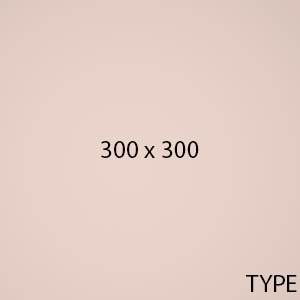
<style>
.page{position:relative;width:300px;height:300px}
.page>*{position:absolute;margin:0}
.t1{font:25px "MyriadPro-Regular";color:#000000}
</style>
<div class="page">
<p class="t1" style="left:101px;top:141px;width:98px;height:17px">300 x 300</p>
<p class="t1" style="left:246px;top:275px;width:51px;height:17px">TYPE</p>
</div>
